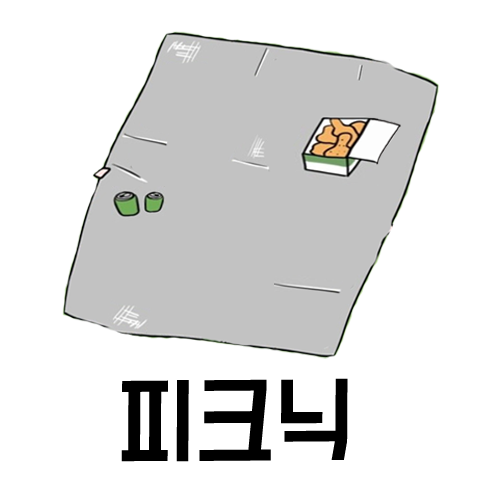
<style>
.page{position:relative;width:500px;height:500px;background:#ffffff}
.page>*{position:absolute;margin:0}
.t1{font:85.8px "BMDoHyeon";color:#000000;scale:0.96 1}
</style>
<div class="page">
<p class="t1" style="left:121px;top:378px;width:227px;height:84px">피크닉</p>
</div>
